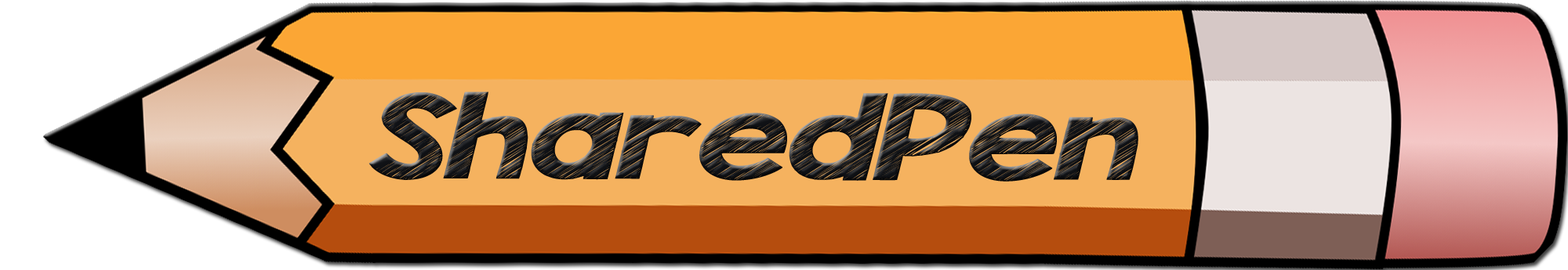
<style>
.page{position:relative;width:1568px;height:270px}
.page>*{position:absolute;margin:0}
.t1{font:94.1px "KGBlankSpaceSketch";color:#101216;font-style:italic;scale:1.4 1}
</style>
<div class="page">
<p class="t1" style="left:368px;top:92px;width:770px;height:90px">SharedPen</p>
</div>
